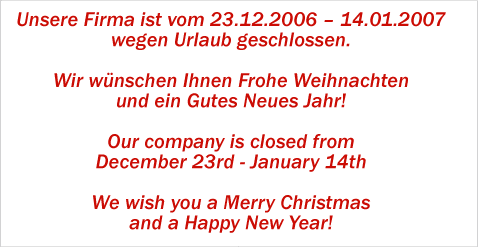
<style>
.page{position:relative;width:478px;height:247px;background:#ffffff}
.page>*{position:absolute;margin:0}
.t1{font:20.3px/20.3px "FranklinGothic-MediumItalic";letter-spacing:0.01em;color:#cb0c04}
</style>
<div class="page">
<p class="t1" style="left:17px;top:12px;width:429px;height:221px;text-align:center">Unsere Firma ist vom 23.12.2006 – 14.01.2007<br>wegen Urlaub geschlossen.<br><br>Wir wünschen Ihnen Frohe Weihnachten<br>und ein Gutes Neues Jahr!<br><br>Our company is closed from<br>December 23rd - January 14th<br><br>We wish you a Merry Christmas<br>and a Happy New Year!</p>
</div>
